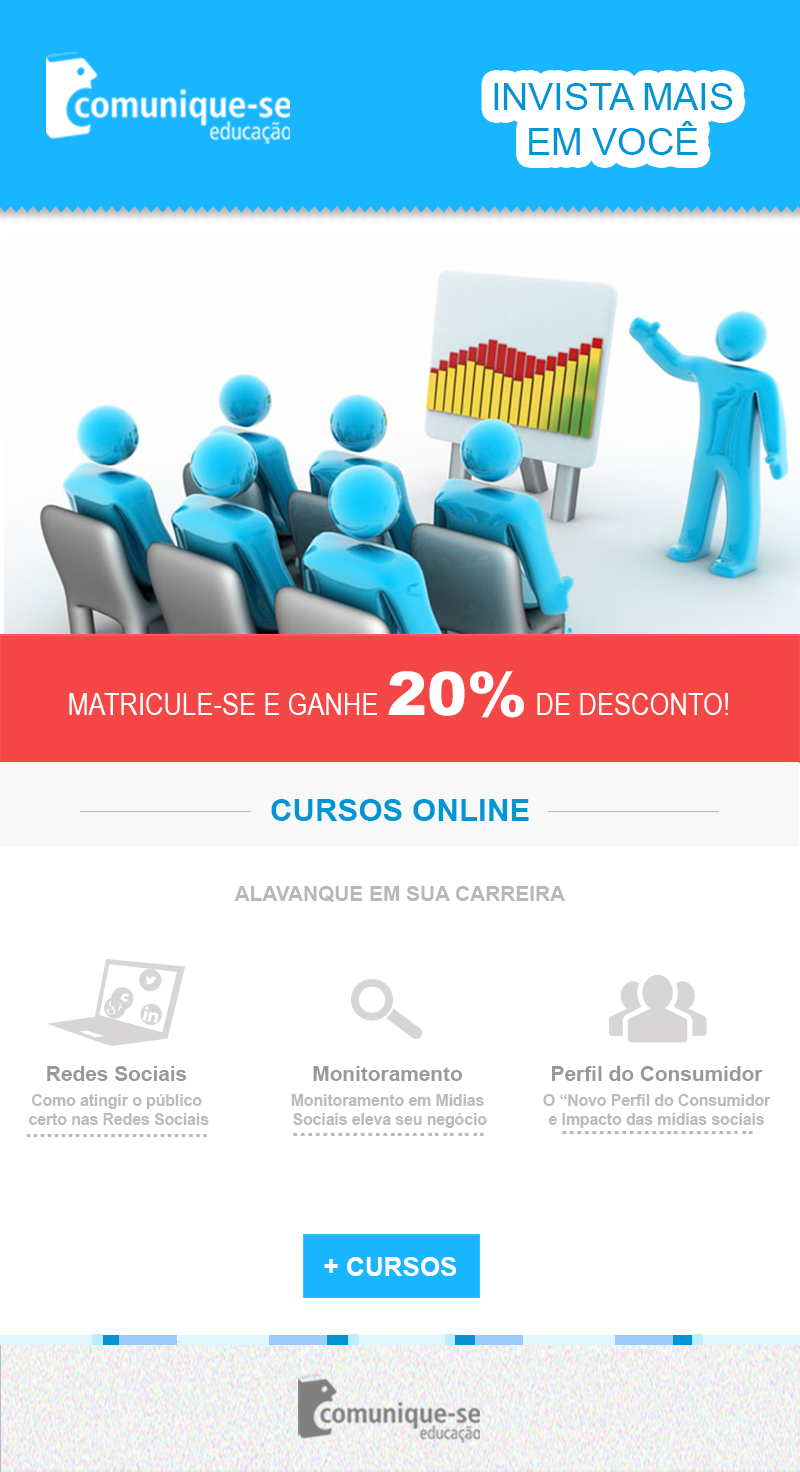
<style>
.page{position:relative;width:800px;height:1472px;background:#ffffff}
.page>*{position:absolute;margin:0}
.t1{font:37.5px "ArialMT";color:#0096d5}
.t2{font:31.2px "ArialNarrow";color:#ffffff}
.t3{font:60.1px "Arial-Black";color:#ffffff}
.t4{font:31.2px "Arial-BoldMT";color:#0096d5}
.t5{font:20.8px "Arial-BoldMT";color:#b8b8b8}
.t6{font:15.7px "Arial-BoldMT";color:#bcbaba}
.t7{font:20.8px "Arial-BoldMT";color:#9a9898}
.t8{font:21.3px "Arial-BoldMT";color:#b8b8b8;scale:1.2 1}
.t9{font:21.3px "Arial-BoldMT";color:#b8b8b8;scale:1.27 1}
.t10{font:26px "Arial-BoldMT";color:#ffffff}
</style>
<div class="page">
<p class="t1" style="left:494px;top:83px;width:239px;height:72px;text-align:center">INVISTA MAIS<br>EM VOCÊ</p>
<p class="t2" style="left:69px;top:671px;width:659px;height:47px">MATRICULE-SE E GANHE <span class="t3">20% </span>DE DESCONTO!</p>
<p class="t4" style="left:271px;top:799px;width:258px;height:22px">CURSOS ONLINE</p>
<p class="t5" style="left:234px;top:886px;width:331px;height:16px">ALAVANQUE EM SUA CARREIRA</p>
<p class="t6" style="left:29px;top:1066px;width:180px;height:59px;text-align:center"><span class="t7">Redes Sociais<br><br></span>Como atingir o público<br> certo nas Redes Sociais</p>
<p class="t6" style="left:291px;top:1066px;width:196px;height:62px;text-align:center"><span class="t7">Monitoramento<br><br></span>Monitoramento em Mídias<br> Sociais eleva seu negócio</p>
<p class="t6" style="left:543px;top:1066px;width:228px;height:62px;text-align:center"><span class="t7">Perfil do Consumidor<br><br></span>O “Novo Perfil do Consumidor<br>e Impacto das mídias sociais</p>
<p class="t8" style="left:26px;top:1134px;width:181px;height:3px">..........................</p>
<p class="t9" style="left:293px;top:1133px;width:191px;height:3px">..........................</p>
<p class="t9" style="left:562px;top:1131px;width:191px;height:3px">..........................</p>
<p class="t10" style="left:324px;top:1257px;width:132px;height:19px">+ CURSOS</p>
</div>
